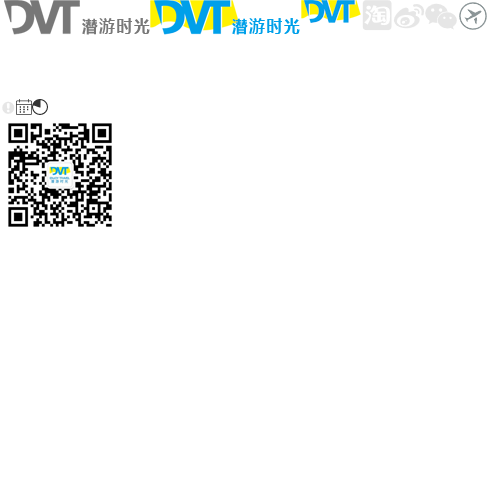
<style>
.page{position:relative;width:500px;height:500px;background:#ffffff}
.page>*{position:absolute;margin:0}
.t1{font:12px "MicrosoftYaHei-Bold";letter-spacing:0.085em;color:#787878;text-transform:uppercase}
.t2{font:12px "MicrosoftYaHei-Bold";letter-spacing:0.085em;color:#00a0e9;text-transform:uppercase}
</style>
<div class="page">
<p class="t1" style="left:82px;top:18px;width:68px;height:17px">潜游时光</p>
<p class="t2" style="left:232px;top:18px;width:68px;height:17px">潜游时光</p>
</div>
